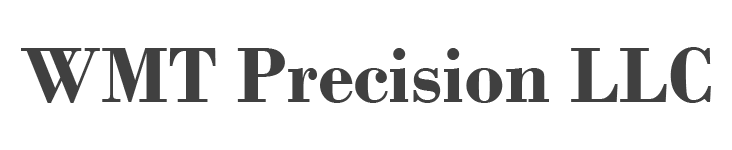
<style>
.page{position:relative;width:732px;height:150px;background:#ffffff}
.page>*{position:absolute;margin:0}
.t1{font:82.8px "BodoniMT-Bold";color:#404040}
</style>
<div class="page">
<p class="t1" style="left:21px;top:47px;width:690px;height:56px">WMT Precision LLC</p>
</div>
